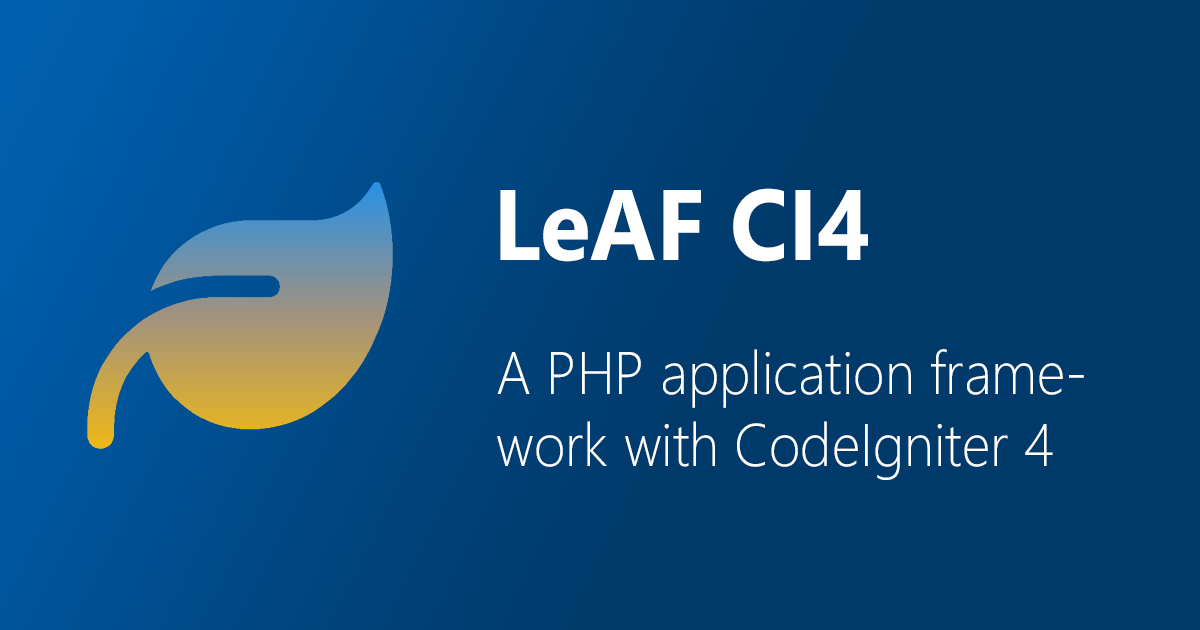
<style>
.page{position:relative;width:1200px;height:630px;background:#003a6b}
.page>*{position:absolute;margin:0}
.t1{font:100px "SegoeUI-Bold";color:#ffffff;scale:0.93 1}
.t2{font:60px "SegoeUI-Light";color:#ffffff;scale:0.93 1}
</style>
<div class="page">
<p class="t1" style="left:500px;top:188px;width:368px;height:74px">LeAF CI4</p>
<p class="t2" style="left:497px;top:349px;width:587px;height:131px">A PHP application frame-<br>work with CodeIgniter 4</p>
</div>
